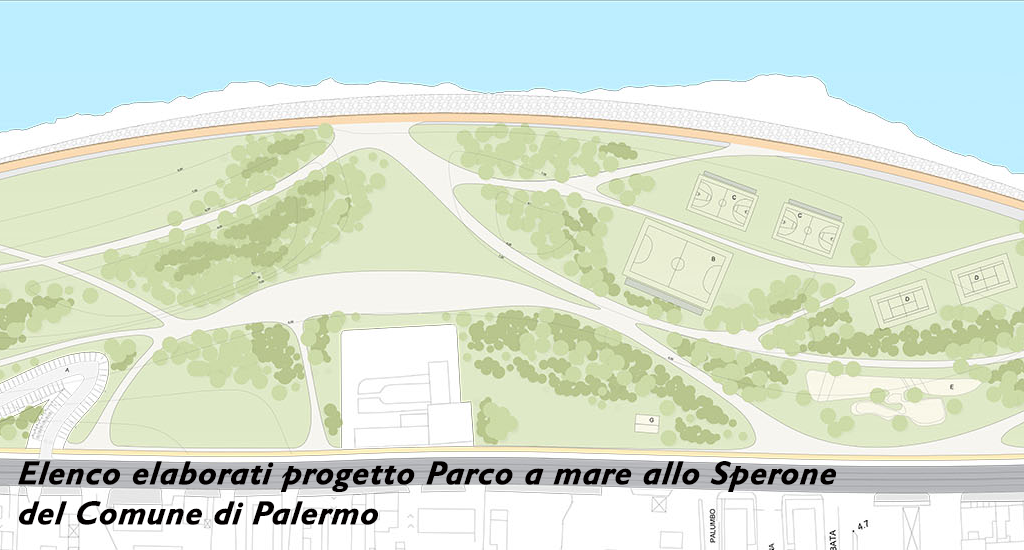
<style>
.page{position:relative;width:1024px;height:550px}
.page>*{position:absolute;margin:0}
.t1{font:33.3px "GillSansMT-BoldItalic";color:#030000;font-weight:bold;font-style:italic}
</style>
<div class="page">
<p class="t1" style="left:18px;top:461px;width:818px;height:64px">Elenco elaborati progetto Parco a mare allo Sperone<br>del Comune di Palermo</p>
</div>
